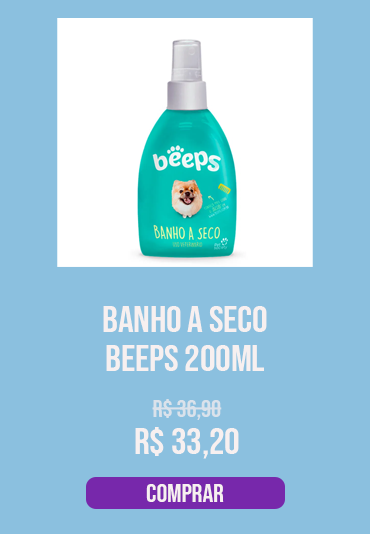
<style>
.page{position:relative;width:370px;height:534px;background:#8bc0df}
.page>*{position:absolute;margin:0}
.t1{font:36.8px "BebasNeue-Regular";letter-spacing:-0.005em;color:#f7f0f0;scale:1.06 1}
.t2{font:23.8px "BebasNeue-Regular";letter-spacing:-0.005em;color:#dae2eb;scale:1.06 1}
.t3{font:25.4px "BebasNeue-Regular";letter-spacing:-0.005em;color:#f7f0f0;scale:1.06 1}
</style>
<div class="page">
<p class="t1" style="left:103px;top:306px;width:164px;height:26px">banho a seco</p>
<p class="t1" style="left:106px;top:345px;width:158px;height:26px">beeps 200ml</p>
<p class="t2" style="left:152px;top:399px;width:70px;height:21px">r$ 36,90</p>
<p class="t1" style="left:135px;top:427px;width:104px;height:32px">r$ 33,20</p>
<p class="t3" style="left:146px;top:484px;width:78px;height:18px">comprar</p>
</div>
